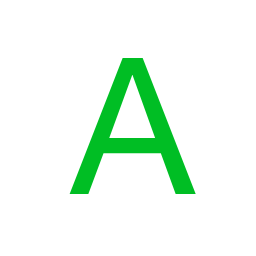
<style>
.page{position:relative;width:256px;height:256px;background:#ffffff}
.page>*{position:absolute;margin:0}
.t1{font:190px "HelveticaNeueLTPro-Roman";color:#00be24}
</style>
<div class="page">
<p class="t1" style="left:69px;top:58px;width:127px;height:136px">A</p>
</div>
